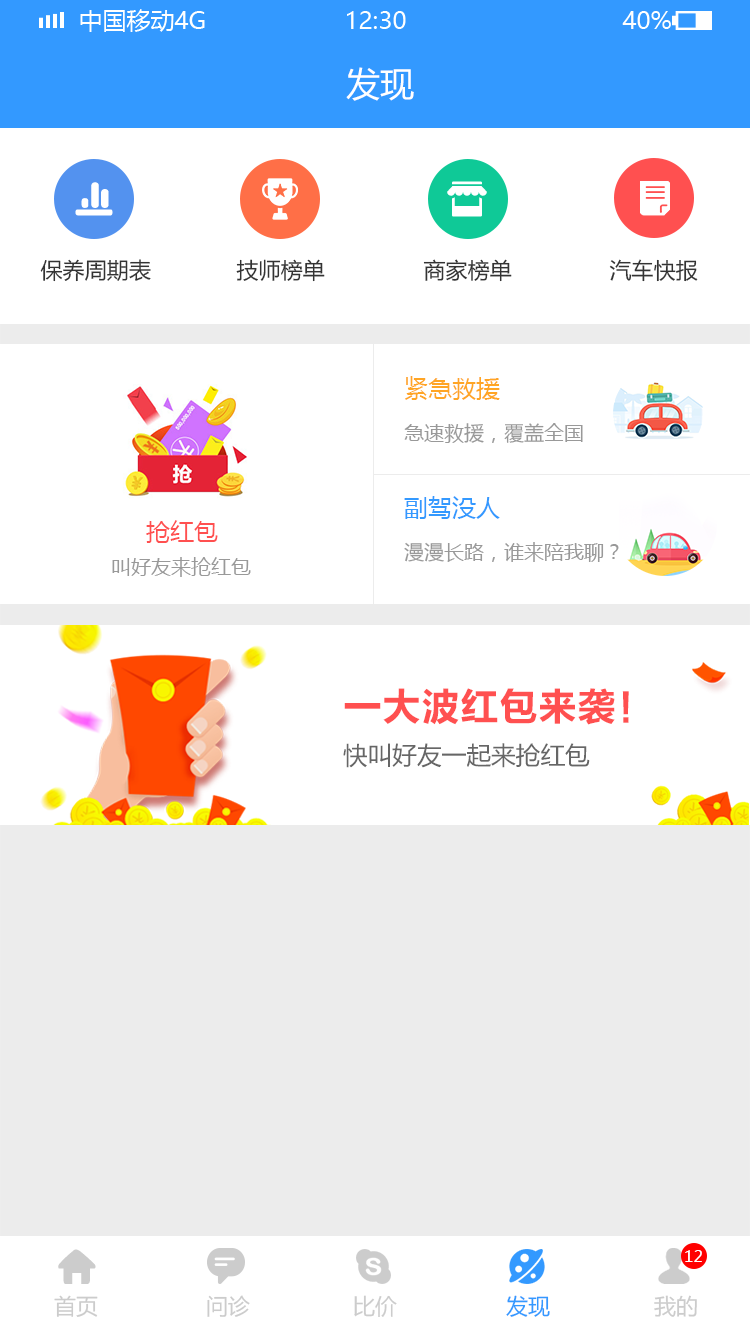
<style>
.page{position:relative;width:750px;height:1334px;background:#ffffff}
.page>*{position:absolute;margin:0}
.t1{font:34px "MicrosoftYaHei";color:#ffffff}
.t2{font:22px "MicrosoftYaHei";color:#333333}
.t3{font:24px "MicrosoftYaHei";color:#ffa525}
.t4{font:20px "MicrosoftYaHei";color:#999999}
.t5{font:24px "MicrosoftYaHei";color:#3399ff}
.t6{font:24px "MicrosoftYaHei";color:#ff5050}
.t7{font:39.1px "FZLTCHK--GBK1-0";color:#ff5050}
.t8{font:24.7px "MicrosoftYaHei";color:#666666}
.t9{font:16px "MicrosoftYaHei";color:#ffffff}
.t10{font:22px "MicrosoftYaHei";color:#cccccc}
.t11{font:22px "MicrosoftYaHei";color:#3399ff}
</style>
<div class="page">
<p class="t1" style="left:346px;top:67px;width:68px;height:34px">发现</p>
<p class="t2" style="left:40px;top:259px;width:111px;height:23px">保养周期表</p>
<p class="t2" style="left:236px;top:259px;width:89px;height:23px">技师榜单</p>
<p class="t2" style="left:423px;top:259px;width:89px;height:23px">商家榜单</p>
<p class="t2" style="left:609px;top:259px;width:89px;height:23px">汽车快报</p>
<p class="t3" style="left:405px;top:376px;width:95px;height:24px">紧急救援</p>
<p class="t4" style="left:404px;top:423px;width:179px;height:20px">急速救援，覆盖全国</p>
<p class="t5" style="left:404px;top:496px;width:96px;height:23px">副驾没人</p>
<p class="t6" style="left:146px;top:520px;width:72px;height:23px">抢红包</p>
<p class="t4" style="left:404px;top:542px;width:215px;height:20px">漫漫长路，谁来陪我聊？</p>
<p class="t4" style="left:112px;top:557px;width:139px;height:20px">叫好友来抢红包</p>
<p class="t7" style="left:344px;top:688px;width:285px;height:37px">一大波红包来袭！</p>
<p class="t8" style="left:343px;top:743px;width:247px;height:25px">快叫好友一起来抢红包</p>
<p class="t9" style="left:685px;top:1250px;width:17px;height:12px">12</p>
<p class="t10" style="left:54px;top:1295px;width:44px;height:22px">首页</p>
<p class="t10" style="left:207px;top:1295px;width:43px;height:22px">问诊</p>
<p class="t10" style="left:354px;top:1295px;width:43px;height:22px">比价</p>
<p class="t11" style="left:506px;top:1295px;width:44px;height:22px">发现</p>
<p class="t10" style="left:654px;top:1295px;width:43px;height:22px">我的</p>
</div>
